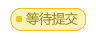
<style>
.page{position:relative;width:96px;height:38px;background:#ffffff}
.page>*{position:absolute;margin:0}
.t1{font:13px "MicrosoftYaHei";color:#968216;text-transform:uppercase}
</style>
<div class="page">
<p class="t1" style="left:26px;top:12px;width:52px;height:13px">等待提交</p>
</div>
